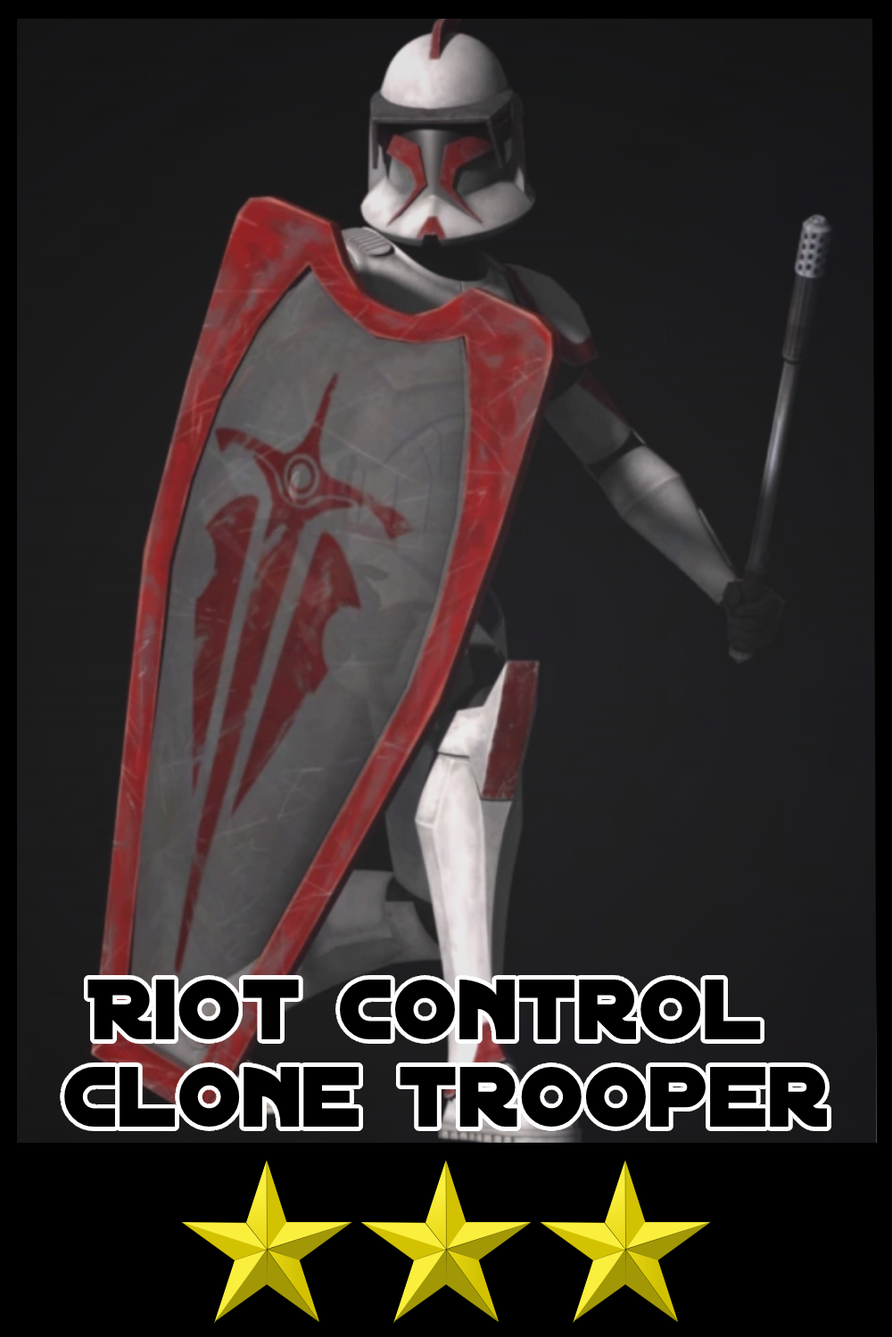
<style>
.page{position:relative;width:892px;height:1337px}
.page>*{position:absolute;margin:0}
.t1{font:91.9px/88.1px "DistantGalaxy";color:#000000}
</style>
<div class="page">
<p class="t1" style="left:64px;top:980px;width:763px;height:147px;text-align:center">Riot control <br>clone trooper</p>
</div>
